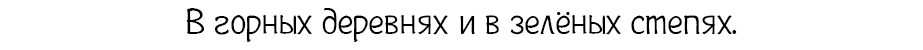
<style>
.page{position:relative;width:923px;height:50px;background:#ffffff}
.page>*{position:absolute;margin:0}
.t1{font:37px "Plainot";color:#000000}
</style>
<div class="page">
<p class="t1" style="left:187px;top:8px;width:550px;height:34px">В горных деревнях и в зелёных степях.</p>
</div>
